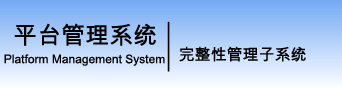
<style>
.page{position:relative;width:342px;height:88px}
.page>*{position:absolute;margin:0}
.t1{font:24px "ArialUnicodeMS";color:#000000}
.t2{font:12px "ArialUnicodeMS";color:#000000}
.t3{font:16px "ArialUnicodeMS";color:#000000}
</style>
<div class="page">
<p class="t1" style="left:14px;top:23px;width:142px;height:23px">平台管理系统</p>
<p class="t2" style="left:4px;top:54px;width:161px;height:12px">Platform Management System</p>
<p class="t3" style="left:179px;top:46px;width:127px;height:16px">完整性管理子系统</p>
</div>
